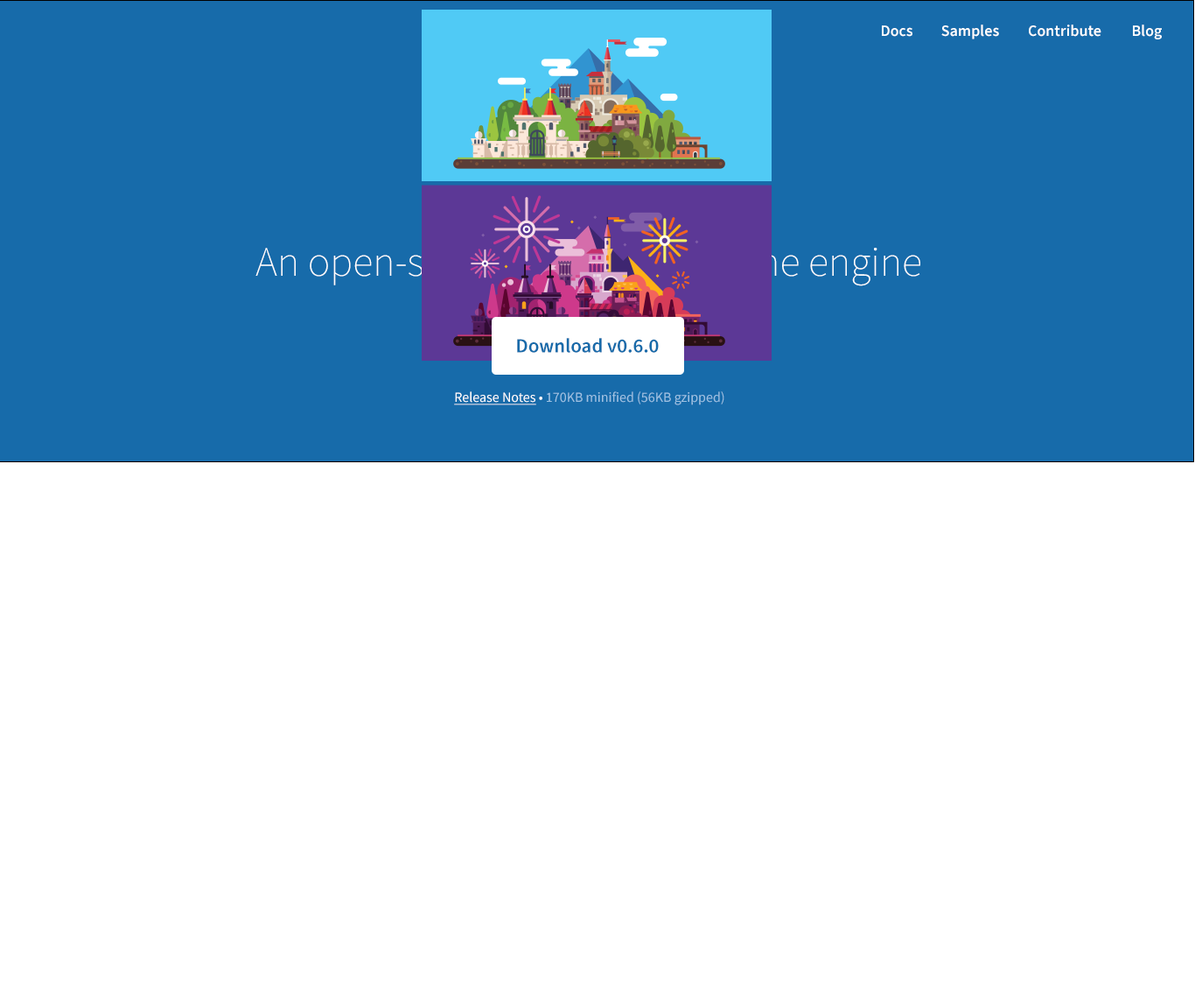
<style>
.page{position:relative;width:1195px;height:998px;background:#ffffff}
.page>*{position:absolute;margin:0}
.t1{font:15.8px "SourceSansPro-Semibold";color:#ffffff}
.t2{font:42px "SourceSansPro-ExtraLight"}
.t3{font:20px "SourceSansPro-Semibold";color:#176baa}
.t4{font:14px "SourceSansPro-Regular";color:#9ec2e3}
.t5{font:14px "SourceSansPro-Regular";color:#ffffff;text-decoration:underline}
.t6{font:14px "SourceSansPro-Regular";color:#ffffff}
</style>
<div class="page">
<p class="t1" style="left:882px;top:25px;width:31px;height:12px">Docs</p>
<p class="t1" style="left:942px;top:25px;width:57px;height:14px">Samples</p>
<p class="t1" style="left:1029px;top:25px;width:73px;height:12px">Contribute</p>
<p class="t1" style="left:1133px;top:25px;width:29px;height:14px">Blog</p>
<p class="t2" style="left:256px;top:248px;width:665px;height:38px">An open-source 2D HTML5 game engine</p>
<p class="t3" style="left:517px;top:338px;width:142px;height:15px">Download v0.6.0</p>
<p class="t4" style="left:454px;top:391px;width:271px;height:14px"><span class="t5">Release Notes</span><span class="t6"> • </span>170KB minified (56KB gzipped)</p>
</div>
